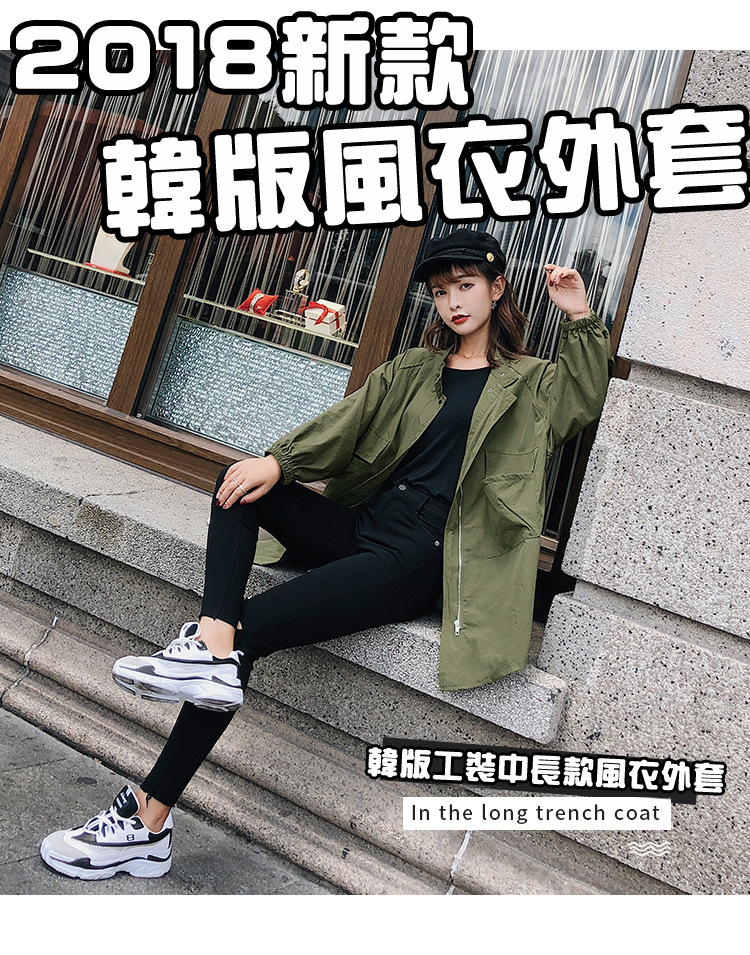
<style>
.page{position:relative;width:750px;height:955px}
.page>*{position:absolute;margin:0}
.t1{font:90px "HanWangZonYi";letter-spacing:0.05em;color:#fefefe;font-weight:bold}
.t2{font:100px "HanWangZonYi";letter-spacing:0.05em;color:#fefefe;font-weight:bold}
.t3{font:30px "HanWangZonYi";letter-spacing:0.05em;color:#fefefe;font-weight:bold}
</style>
<div class="page">
<p class="t1" style="left:16px;top:17px;width:452px;height:88px">2018新款</p>
<p class="t2" style="left:103px;top:108px;width:644px;height:129px;rotate:-3deg">韓版風衣外套</p>
<p class="t3" style="left:367px;top:747px;width:357px;height:46px;rotate:3deg">韓版工裝中長款風衣外套</p>
</div>
